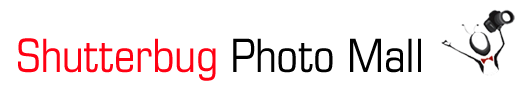
<style>
.page{position:relative;width:529px;height:102px;background:#ffffff}
.page>*{position:absolute;margin:0}
.t1{font:46px "EurostileLT-Condensed";color:#ff0012}
.t2{font:46px "EurostileLT-Condensed";color:#000000}
</style>
<div class="page">
<p class="t1" style="left:18px;top:38px;width:403px;height:43px">Shutterbug <span class="t2">Photo Mall</span></p>
</div>
